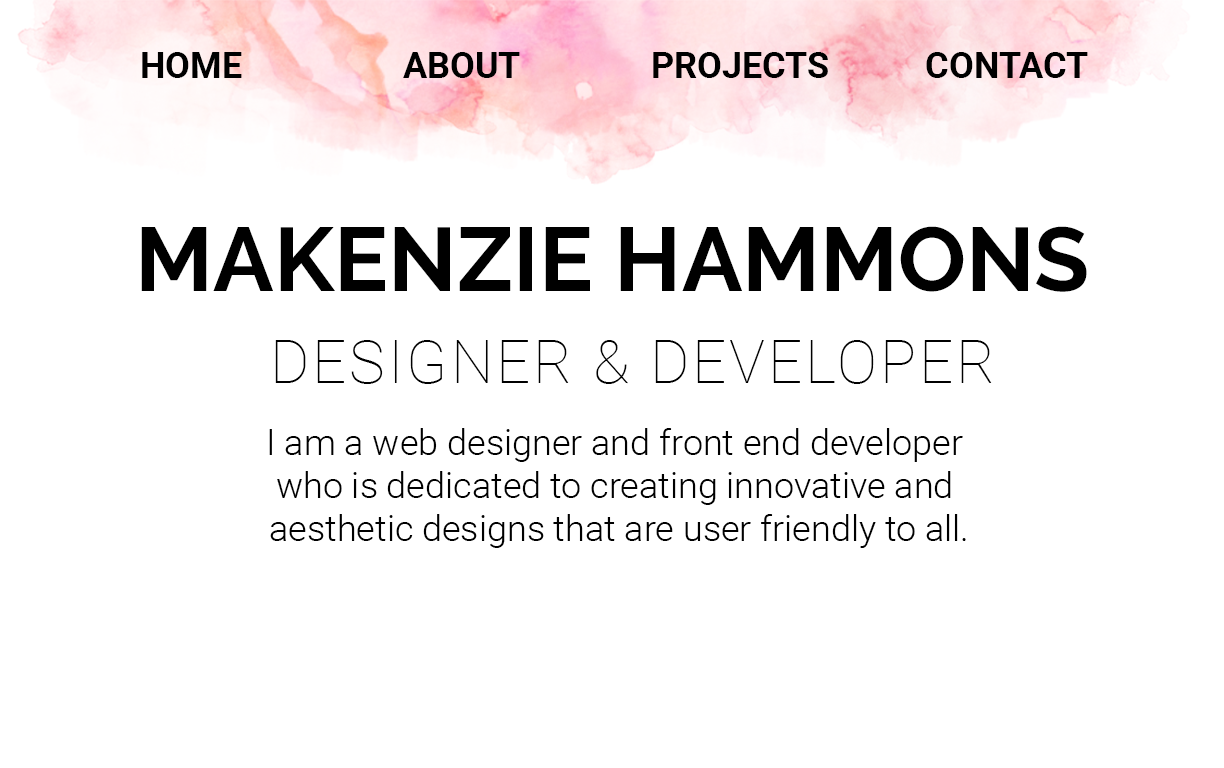
<style>
.page{position:relative;width:1224px;height:768px;background:#ffffff}
.page>*{position:absolute;margin:0}
.t1{font:36px "Roboto-Bold";color:#000000}
.t2{font:90px "Raleway-Bold";color:#000000}
.t3{font:60px "Roboto-Thin";letter-spacing:0.05em;color:#000000}
.t4{font:36px "Roboto-Light";color:#000000}
</style>
<div class="page">
<p class="t1" style="left:142px;top:52px;width:100px;height:26px">HOME</p>
<p class="t1" style="left:403px;top:52px;width:117px;height:26px">ABOUT</p>
<p class="t1" style="left:653px;top:52px;width:175px;height:26px">PROJECTS</p>
<p class="t1" style="left:926px;top:52px;width:162px;height:26px">CONTACT</p>
<p class="t2" style="left:141px;top:226px;width:946px;height:66px">MAKENZIE HAMMONS</p>
<p class="t3" style="left:275px;top:340px;width:717px;height:44px">DESIGNER &amp; DEVELOPER</p>
<p class="t4" style="left:269px;top:428px;width:697px;height:120px;text-align:center">I am a web designer and front end developer <br>who is dedicated to creating innovative and <br>aesthetic designs that are user friendly to all.</p>
</div>
